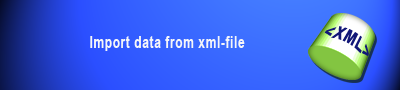
<style>
.page{position:relative;width:400px;height:90px}
.page>*{position:absolute;margin:0}
.t1{font:18.8px "Arial-BoldMT";letter-spacing:0.05em;color:#121777;scale:0.77 1}
.t2{font:15.6px "Arial-BoldMT";letter-spacing:0.05em;color:#f5f6f9;scale:0.77 1}
</style>
<div class="page">
<p class="t1" style="left:324px;top:26px;width:45px;height:30px;rotate:29deg">&lt;XML&gt;</p>
<p class="t2" style="left:90px;top:36px;width:155px;height:15px">Import data from xml-file</p>
</div>
